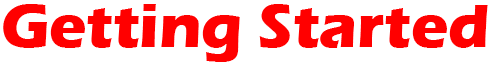
<style>
.page{position:relative;width:491px;height:66px;background:#ffffff}
.page>*{position:absolute;margin:0}
.t1{font:62.5px "ErasITC-Bold";color:#ff0000}
</style>
<div class="page">
<p class="t1" style="left:3px;top:4px;width:485px;height:58px">Getting Started</p>
<p class="t1" style="left:4px;top:5px;width:485px;height:58px">Getting Started</p>
</div>
